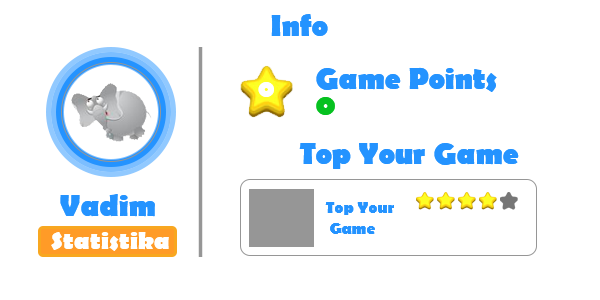
<style>
.page{position:relative;width:600px;height:300px;background:#ffffff}
.page>*{position:absolute;margin:0}
.t1{font:30px "BerlinSansFB-Bold";color:#2493ff}
.t2{font:25px "BerlinSansFB-Bold";color:#fffffd}
.t3{font:30px "BerlinSansFB-Bold";color:#06c120}
.t4{font:16px/21.6px "BerlinSansFB-Bold";color:#2493ff}
.t5{font:25px "BerlinSansFB-Bold";color:#ffffff}
</style>
<div class="page">
<p class="t1" style="left:271px;top:14px;width:57px;height:22px">Info</p>
<p class="t1" style="left:316px;top:67px;width:181px;height:25px">Game Points</p>
<p class="t2" style="left:258px;top:82px;width:16px;height:15px">0</p>
<p class="t3" style="left:316px;top:97px;width:19px;height:18px">0</p>
<p class="t1" style="left:299px;top:143px;width:220px;height:26px">Top Your Game</p>
<p class="t1" style="left:60px;top:194px;width:95px;height:23px">Vadim</p>
<p class="t4" style="left:325px;top:202px;width:69px;height:32px">Top Your<br> Game</p>
<p class="t5" style="left:51px;top:232px;width:118px;height:19px">Statistika</p>
</div>
